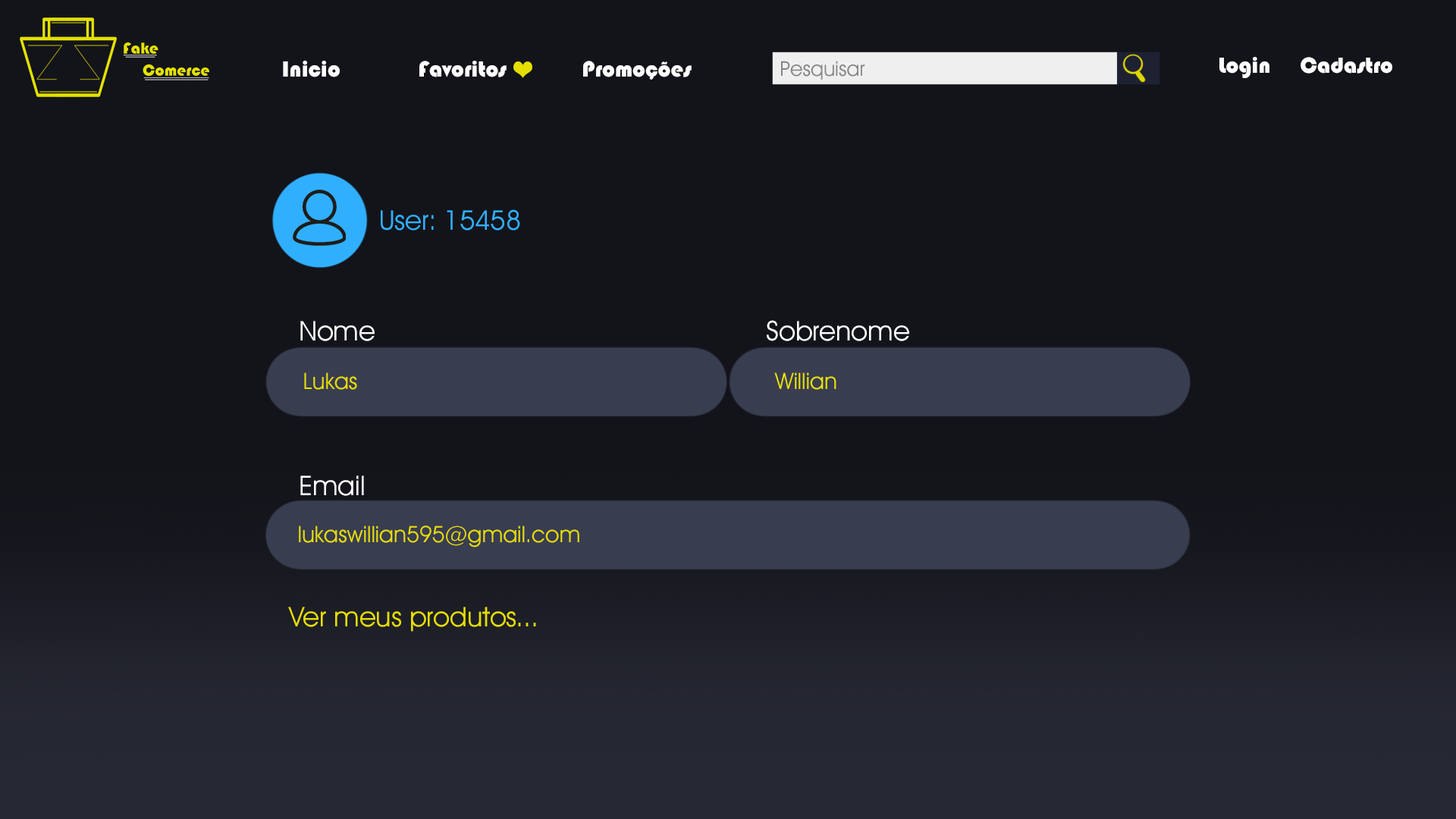
<style>
.page{position:relative;width:1456px;height:819px;background:#13141a}
.page>*{position:absolute;margin:0}
.t1{font:22.7px "Bauhaus93";color:#ffffff}
.t2{font:27.3px "Decker-Regular";color:#31afff}
.t3{font:27.3px "Decker-Regular";color:#ffffff}
.t4{font:22.7px "Decker-Regular";color:#e6de00}
.t5{font:27.3px "Decker-Regular";color:#e6de00}
</style>
<div class="page">
<p class="t1" style="left:283px;top:61px;width:409px;height:19px">Inicio   Favoritos   Promoções</p>
<p class="t1" style="left:1219px;top:57px;width:173px;height:21px">Login  Cadastro</p>
<p class="t2" style="left:381px;top:209px;width:139px;height:22px">User: 15458</p>
<p class="t3" style="left:300px;top:321px;width:75px;height:20px">Nome</p>
<p class="t3" style="left:767px;top:320px;width:142px;height:21px">Sobrenome</p>
<p class="t4" style="left:304px;top:372px;width:53px;height:18px">Lukas</p>
<p class="t4" style="left:774px;top:372px;width:62px;height:18px">Willian</p>
<p class="t3" style="left:300px;top:475px;width:64px;height:21px">Email</p>
<p class="t4" style="left:299px;top:526px;width:280px;height:22px">lukaswillian595@gmail.com</p>
<p class="t5" style="left:288px;top:607px;width:248px;height:25px">Ver meus produtos...</p>
</div>
